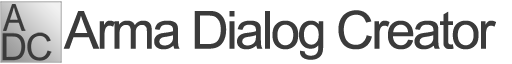
<style>
.page{position:relative;width:512px;height:64px;background:#ffffff}
.page>*{position:absolute;margin:0}
.t1{font:52.5px "ArialMT";letter-spacing:-0.05em;color:#3b3b3b}
</style>
<div class="page">
<p class="t1" style="left:63px;top:10px;width:433px;height:50px">Arma Dialog Creator</p>
</div>
